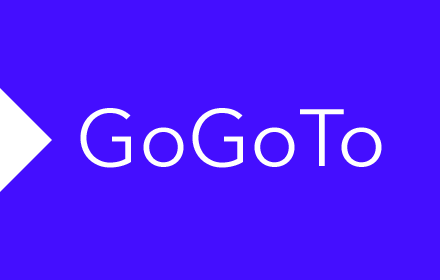
<style>
.page{position:relative;width:440px;height:280px;background:#440eff}
.page>*{position:absolute;margin:0}
.t1{font:80px "AvenirNext-Regular";color:#ffffff}
</style>
<div class="page">
<p class="t1" style="left:80px;top:108px;width:302px;height:60px">GoGoTo</p>
</div>
